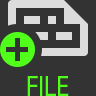
<style>
.page{position:relative;width:96px;height:96px;background:#333333}
.page>*{position:absolute;margin:0}
.t1{font:28px "HelveticaNeueLTStd-Cn";color:#50ff1a;text-transform:uppercase}
</style>
<div class="page">
<p class="t1" style="left:27px;top:76px;width:42px;height:20px">FILE</p>
</div>
